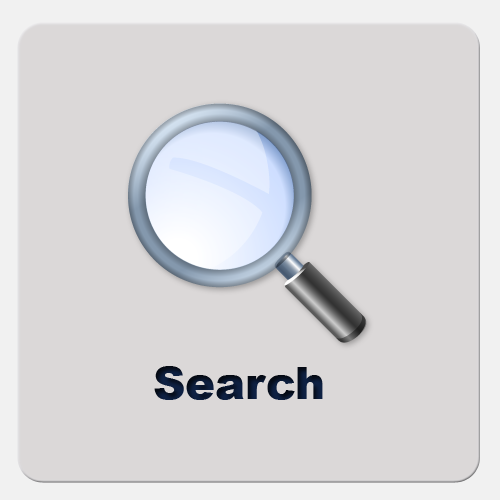
<style>
.page{position:relative;width:500px;height:500px;background:#dbd8d8}
.page>*{position:absolute;margin:0}
.t1{font:45px "Arial-Black";color:#0a1831}
</style>
<div class="page">
<p class="t1" style="left:154px;top:366px;width:169px;height:34px">Search</p>
</div>
